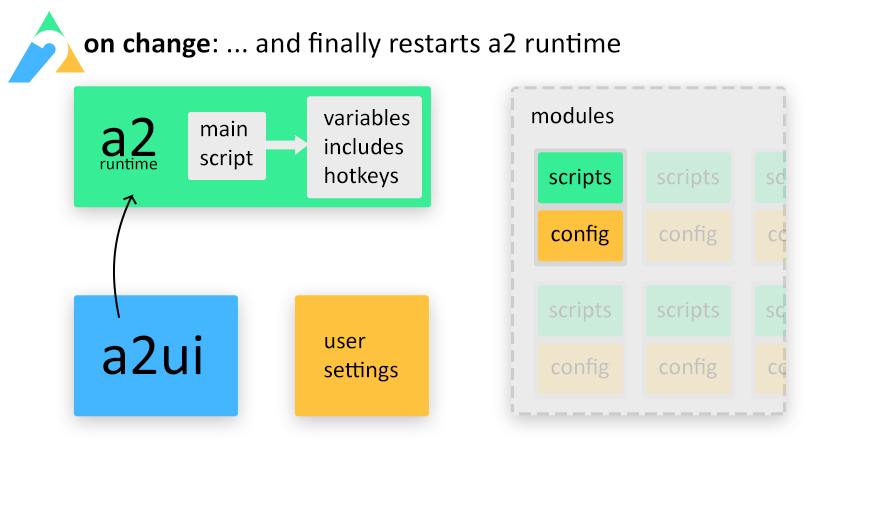
<style>
.page{position:relative;width:871px;height:508px;background:#ffffff}
.page>*{position:absolute;margin:0}
.t1{font:30px "Calibri";color:#000000}
.t2{font:30px "Calibri-Bold";color:#000000}
.t3{font:24px "Calibri";color:#000000}
.t4{font:60px "Calibri";color:#000000}
.t5{font:18px "Calibri";color:#000000}
.t6{font:24px "Calibri";color:#c1c1c1}
</style>
<div class="page">
<p class="t1" style="left:84px;top:32px;width:536px;height:26px"><span class="t2">on change</span>: ... and finally restarts a2 runtime</p>
<p class="t3" style="left:324px;top:109px;width:86px;height:79px">variables<br>includes<br>hotkeys</p>
<p class="t3" style="left:532px;top:107px;width:82px;height:17px">modules</p>
<p class="t4" style="left:102px;top:117px;width:54px;height:40px">a2</p>
<p class="t3" style="left:200px;top:120px;width:53px;height:50px">main<br>script</p>
<p class="t5" style="left:100px;top:157px;width:57px;height:13px">runtime</p>
<p class="t3" style="left:549px;top:168px;width:62px;height:21px">scripts</p>
<p class="t6" style="left:657px;top:168px;width:62px;height:21px">scripts</p>
<p class="t3" style="left:551px;top:224px;width:58px;height:22px">config</p>
<p class="t6" style="left:659px;top:224px;width:58px;height:22px">config</p>
<p class="t6" style="left:549px;top:301px;width:62px;height:21px">scripts</p>
<p class="t6" style="left:657px;top:301px;width:62px;height:21px">scripts</p>
<p class="t4" style="left:103px;top:335px;width:99px;height:40px">a2ui</p>
<p class="t3" style="left:324px;top:336px;width:74px;height:46px">user<br>settings</p>
<p class="t6" style="left:551px;top:357px;width:58px;height:22px">config</p>
<p class="t6" style="left:659px;top:357px;width:58px;height:22px">config</p>
</div>
